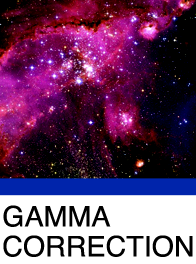
<style>
.page{position:relative;width:196px;height:264px}
.page>*{position:absolute;margin:0}
.t1{font:28.2px/30px "Helvetica";color:#000000}
</style>
<div class="page">
<p class="t1" style="left:3px;top:205px;width:190px;height:52px">GAMMA<br>CORRECTION</p>
</div>
